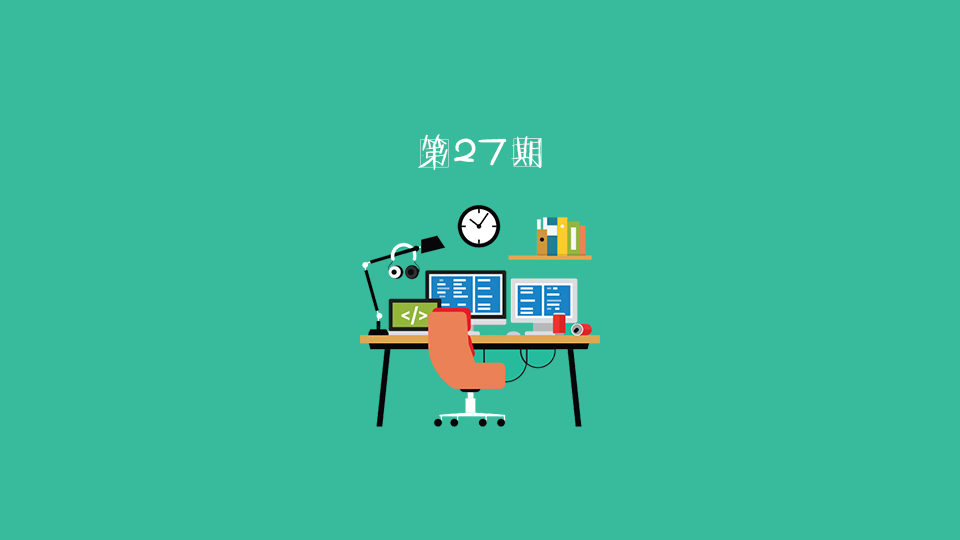
<style>
.page{position:relative;width:960px;height:540px;background:#38bb9c}
.page>*{position:absolute;margin:0}
.t1{font:38.9px "FZNHT";color:#ffffff}
</style>
<div class="page">
<p class="t1" style="left:418px;top:134px;width:124px;height:36px">第27期</p>
</div>
